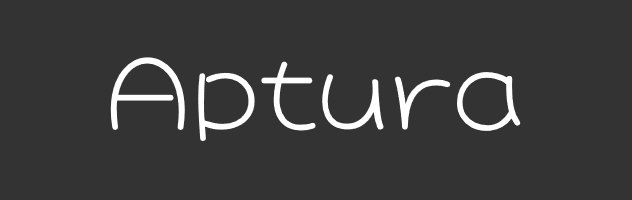
<style>
.page{position:relative;width:632px;height:200px;background:#333333}
.page>*{position:absolute;margin:0}
.t1{font:96px "HachiMaruPop-Regular";color:#ffffff}
</style>
<div class="page">
<p class="t1" style="left:110px;top:57px;width:411px;height:85px">Aptura</p>
</div>
